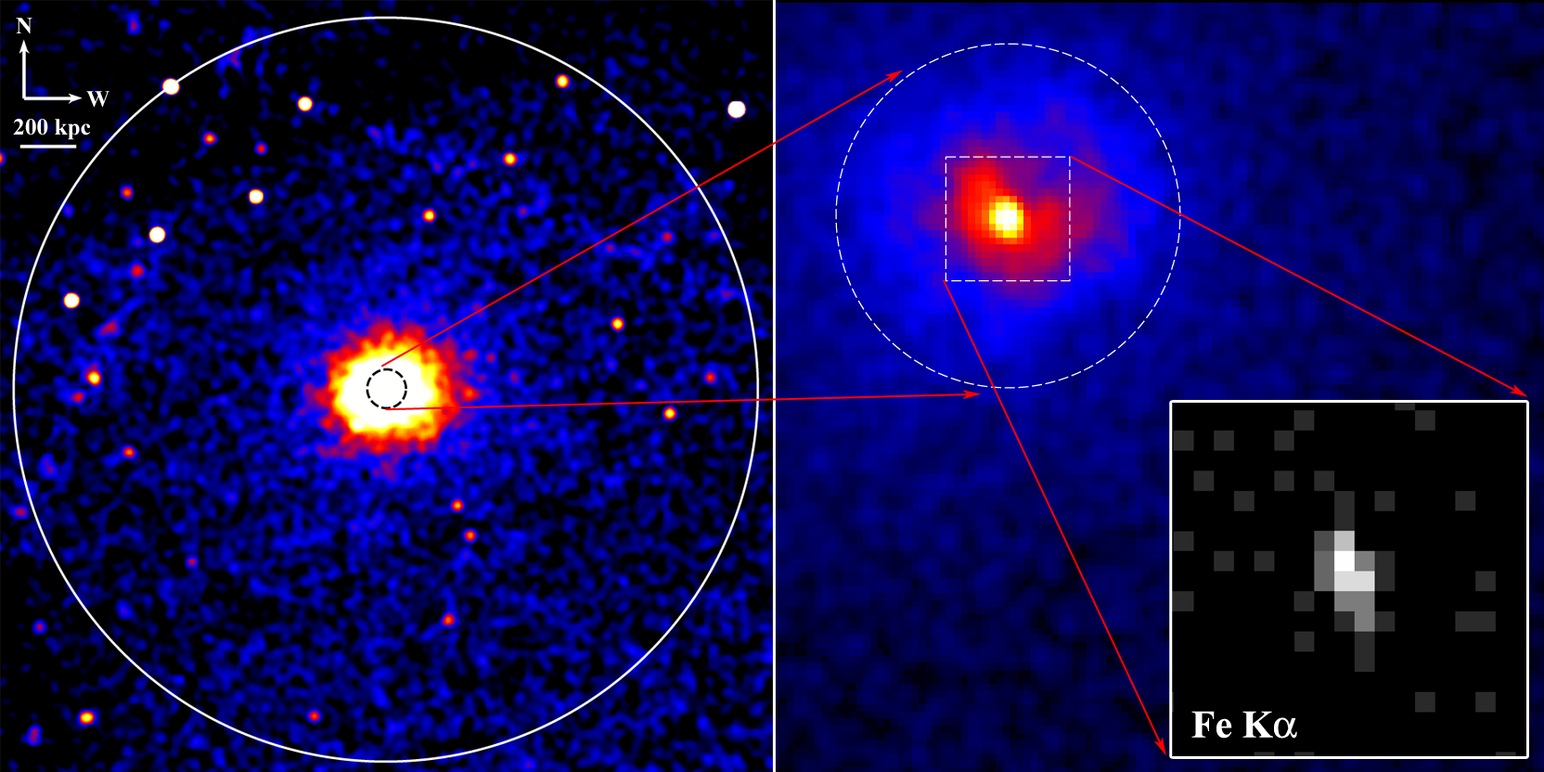
<style>
.page{position:relative;width:1544px;height:772px}
.page>*{position:absolute;margin:0}
.t1{font:23.2px "TimesNewRomanPS-BoldMT";color:#ffffff}
.t2{font:38.7px "TimesNewRomanPS-BoldMT";color:#ffffff}
.t3{font:38.7px "Symbol";color:#ffffff}
</style>
<div class="page">
<p class="t1" style="left:16px;top:18px;width:16px;height:16px">N</p>
<p class="t1" style="left:86px;top:91px;width:24px;height:17px">W</p>
<p class="t1" style="left:13px;top:119px;width:78px;height:21px">200 kpc</p>
<p class="t2" style="left:1192px;top:711px;width:105px;height:28px">Fe K<span class="t3">a</span></p>
</div>
